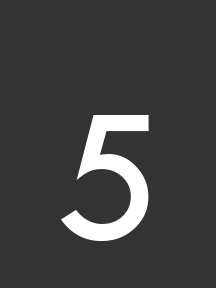
<style>
.page{position:relative;width:216px;height:288px;background:#333333}
.page>*{position:absolute;margin:0}
.t1{font:196px "TwCenMT-Regular";color:#ffffff}
</style>
<div class="page">
<p class="t1" style="left:61px;top:115px;width:88px;height:126px">5</p>
</div>
